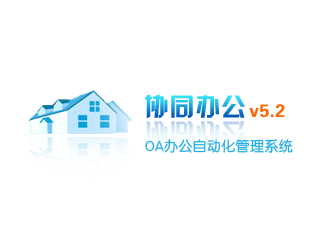
<style>
.page{position:relative;width:319px;height:251px;background:#ffffff}
.page>*{position:absolute;margin:0}
.t1{font:25px "HYk2gj";letter-spacing:0.025em}
.t2{font:18px "FZDHTJW--GB1-0";letter-spacing:0.025em;color:#ff6600}
.t3{font:14px "FZY3JW--GB1-0";letter-spacing:0.025em;color:#24aee1}
</style>
<div class="page">
<p class="t1" style="left:145px;top:95px;width:100px;height:24px">协同办公</p>
<p class="t2" style="left:249px;top:104px;width:36px;height:14px">v5.2</p>
<p class="t3" style="left:145px;top:139px;width:148px;height:14px">OA办公自动化管理系统</p>
</div>
